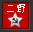
<style>
.page{position:relative;width:33px;height:32px;background:#c50000}
.page>*{position:absolute;margin:0}
.t1{font:10.4px "SimSun";color:#ffffff}
</style>
<div class="page">
<p class="t1" style="left:7px;top:4px;width:18px;height:9px">二野</p>
</div>
